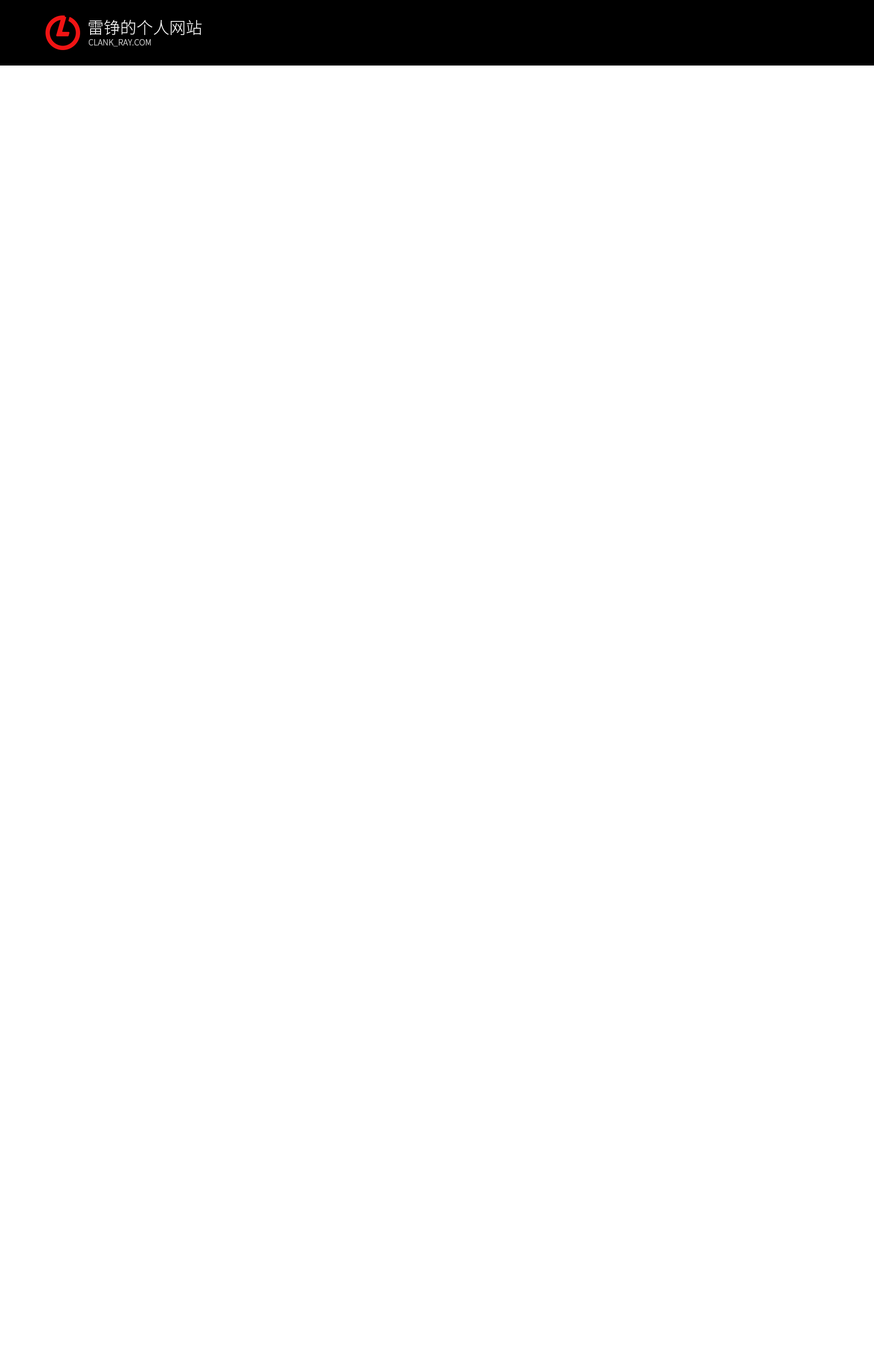
<style>
.page{position:relative;width:874px;height:1365px;background:#ffffff}
.page>*{position:absolute;margin:0}
.t1{font:16.4px "NotoSansHans-Light";color:#eeeeee;text-transform:uppercase}
.t2{font:8.2px "NotoSansHans-Light";color:#cccccc;text-transform:uppercase}
</style>
<div class="page">
<p class="t1" style="left:89px;top:20px;width:113px;height:15px">雷铮的个人网站</p>
<p class="t2" style="left:89px;top:39px;width:62px;height:7px">Clank_RAY.com</p>
</div>
